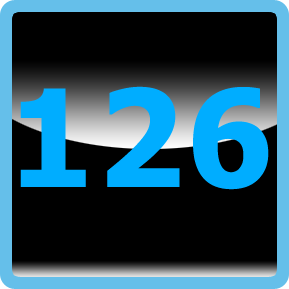
<style>
.page{position:relative;width:289px;height:289px;background:#000000}
.page>*{position:absolute;margin:0}
.t1{font:135px "Tahoma-Bold";letter-spacing:0.025em;color:#00adff}
</style>
<div class="page">
<p class="t1" style="left:20px;top:86px;width:249px;height:104px">126</p>
</div>
